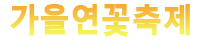
<style>
.page{position:relative;width:200px;height:40px;background:#ffffff}
.page>*{position:absolute;margin:0}
.t1{font:33px "MalgunGothicBold";font-weight:bold;scale:0.91 1}
</style>
<div class="page">
<p class="t1" style="left:10px;top:4px;width:180px;height:33px">가을연꽃축제</p>
</div>
